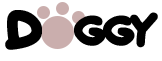
<style>
.page{position:relative;width:162px;height:61px;background:#ffffff}
.page>*{position:absolute;margin:0}
.t1{font:48px "QuickLove";letter-spacing:-0.075em;color:#000000}
.t2{font:37.9px "QuickLove";letter-spacing:-0.075em;color:#000000}
</style>
<div class="page">
<p class="t1" style="left:5px;top:10px;width:37px;height:40px">D</p>
<p class="t2" style="left:74px;top:12px;width:84px;height:36px">ggy</p>
</div>
